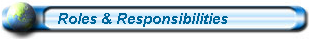
<style>
.page{position:relative;width:310px;height:40px}
.page>*{position:absolute;margin:0}
.t1{font:15px "Arial-BoldItalicMT";color:#006699}
</style>
<div class="page">
<p class="t1" style="left:58px;top:13px;width:170px;height:14px">Roles &amp; Responsibilities</p>
</div>
